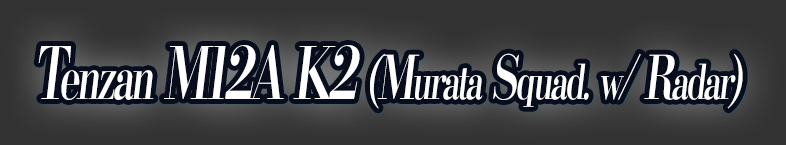
<style>
.page{position:relative;width:786px;height:145px;background:#333333}
.page>*{position:absolute;margin:0}
.t1{font:72px "KochoStd-Heavy";letter-spacing:-0.08em;color:#ffffff;font-style:italic;scale:0.67 1}
.t2{font:57.6px "KochoStd-Heavy";letter-spacing:-0.08em;color:#ffffff;font-style:italic;scale:0.67 1}
.t3{font:60px "KochoStd-Heavy";letter-spacing:-0.08em;color:#ffffff;font-style:italic;scale:0.67 1}
.t4{font:48px "KochoStd-Heavy";letter-spacing:-0.08em;color:#ffffff;font-style:italic;scale:0.67 1}
</style>
<div class="page">
<p class="t1" style="left:38px;top:45px;width:705px;height:64px">T<span class="t2">enzan</span> M12A K2 <span class="t3">(M</span><span class="t4">urata</span><span class="t3"> S</span><span class="t4">quad. w</span><span class="t3">/ R</span><span class="t4">adar</span><span class="t3">)</span></p>
</div>
